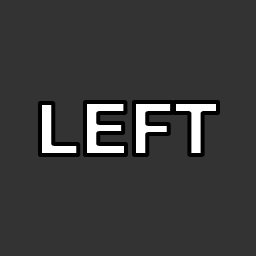
<style>
.page{position:relative;width:256px;height:256px;background:#333333}
.page>*{position:absolute;margin:0}
.t1{font:72px "HelveticaNeue-Bold";color:#ffffff;font-weight:bold}
</style>
<div class="page">
<p class="t1" style="left:40px;top:102px;width:178px;height:53px">LEFT</p>
</div>
